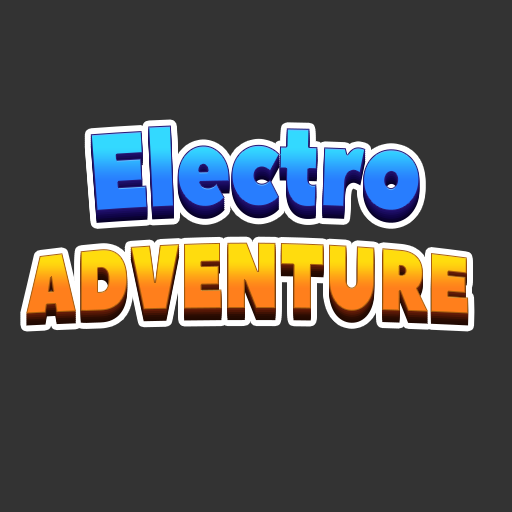
<style>
.page{position:relative;width:512px;height:512px;background:#333333}
.page>*{position:absolute;margin:0}
.t1{font:109.7px "PeaceSans";letter-spacing:-0.025em;scale:0.81 1}
.t2{font:80px "PeaceSans";scale:0.83 1}
</style>
<div class="page">
<p class="t1" style="left:90px;top:125px;width:330px;height:86px">Electro</p>
<p class="t2" style="left:26px;top:242px;width:443px;height:72px">ADVENTURE</p>
</div>
